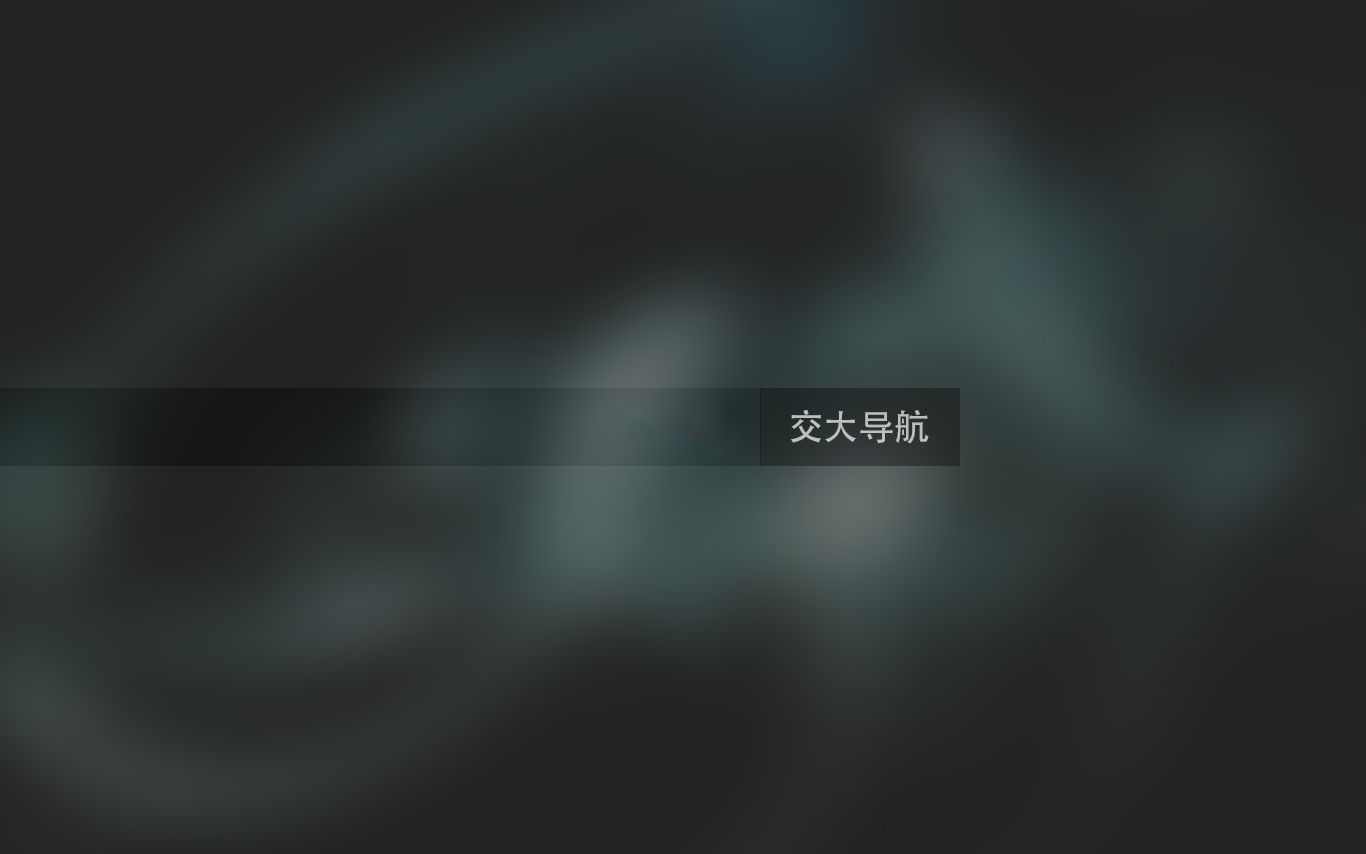
<style>
.page{position:relative;width:1366px;height:854px}
.page>*{position:absolute;margin:0}
.t1{font:35.3px "AdobeHeitiStd-Regular";color:#bdbfbf}
</style>
<div class="page">
<p class="t1" style="left:790px;top:409px;width:139px;height:35px">交大导航</p>
</div>
